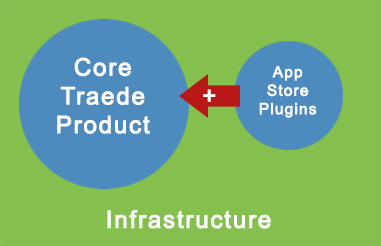
<style>
.page{position:relative;width:381px;height:246px;background:#85bf4d}
.page>*{position:absolute;margin:0}
.t1{font:24px "ArialMT";letter-spacing:0.05em;color:#ffffff;font-weight:bold}
.t2{font:15.4px "ArialMT";letter-spacing:0.05em;color:#ffffff;font-weight:bold}
</style>
<div class="page">
<p class="t1" style="left:57px;top:57px;width:93px;height:77px;text-align:center">Core<br>Traede<br>Product</p>
<p class="t2" style="left:259px;top:66px;width:58px;height:52px;text-align:center">App<br>Store<br>Plugins</p>
<p class="t1" style="left:203px;top:89px;width:13px;height:13px">+</p>
<p class="t1" style="left:107px;top:210px;width:164px;height:19px">Infrastructure</p>
</div>
